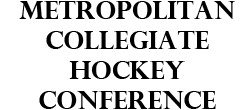
<style>
.page{position:relative;width:250px;height:110px;background:#ffffff}
.page>*{position:absolute;margin:0}
.t1{font:25px "PerpetuaTitlingMT-Bold";color:#000000}
</style>
<div class="page">
<p class="t1" style="left:19px;top:1px;width:216px;height:108px;text-align:center">metropolitan<br>collegiate<br>hockey<br>conference</p>
</div>
